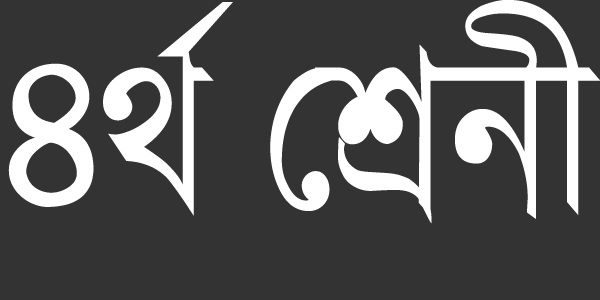
<style>
.page{position:relative;width:600px;height:300px;background:#333333}
.page>*{position:absolute;margin:0}
.t1{font:229.5px "KalpurushANSI";color:#ffffff;scale:0.87 1}
</style>
<div class="page">
<p class="t1" style="left:8px;top:0px;width:593px;height:224px">4_© †kÖbx</p>
</div>
